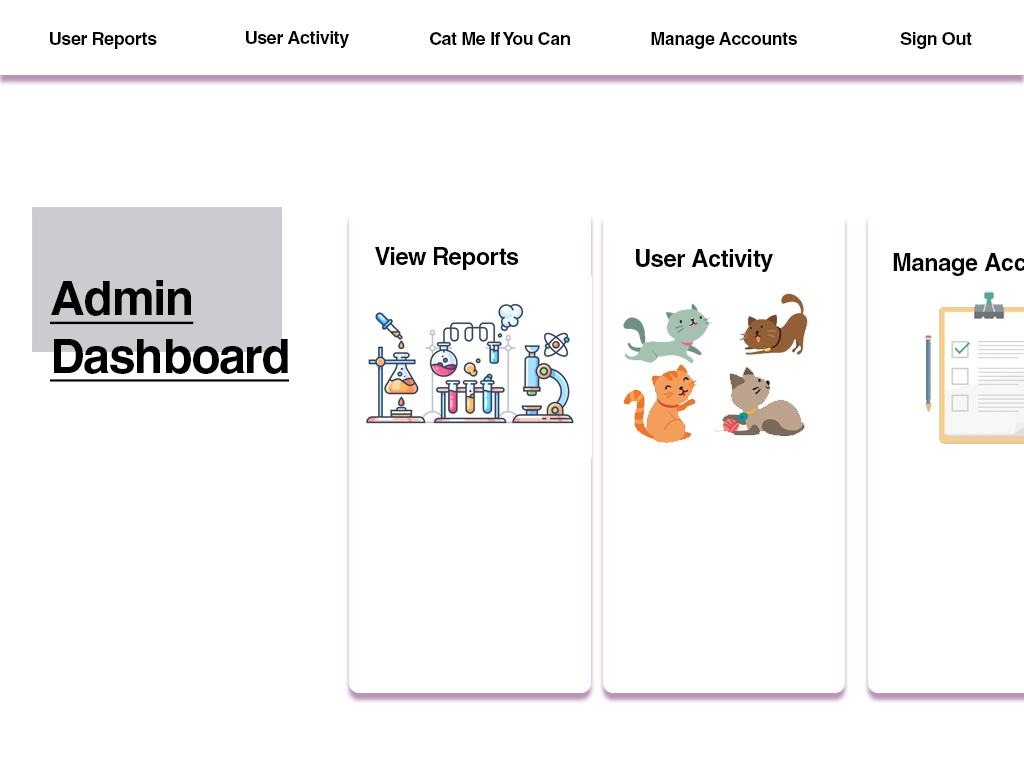
<style>
.page{position:relative;width:1024px;height:768px;background:#ffffff}
.page>*{position:absolute;margin:0}
.t1{font:18px "Helvetica-Bold";letter-spacing:-0.025em;color:#000000}
.t2{font:24px "Helvetica-Bold";letter-spacing:-0.025em;color:#000000}
.t3{font:48px "Helvetica-Bold";letter-spacing:-0.025em;color:#000000;text-decoration:underline}
</style>
<div class="page">
<p class="t1" style="left:50px;top:32px;width:107px;height:17px">User Reports</p>
<p class="t1" style="left:246px;top:31px;width:103px;height:17px">User Activity</p>
<p class="t1" style="left:430px;top:32px;width:140px;height:13px">Cat Me If You Can</p>
<p class="t1" style="left:651px;top:32px;width:146px;height:17px">Manage Accounts</p>
<p class="t1" style="left:900px;top:32px;width:72px;height:17px">Sign Out</p>
<p class="t2" style="left:375px;top:247px;width:144px;height:23px">View Reports</p>
<p class="t2" style="left:636px;top:249px;width:137px;height:23px">User Activity</p>
<p class="t3" style="left:50px;top:280px;width:239px;height:102px">Admin<br>Dashboard</p>
</div>
